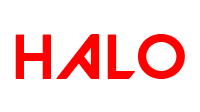
<style>
.page{position:relative;width:200px;height:112px;background:#ffffff}
.page>*{position:absolute;margin:0}
.t1{font:64.3px "VALORANT-Regular";color:#ff0000}
</style>
<div class="page">
<p class="t1" style="left:15px;top:34px;width:170px;height:45px">HALO</p>
</div>
